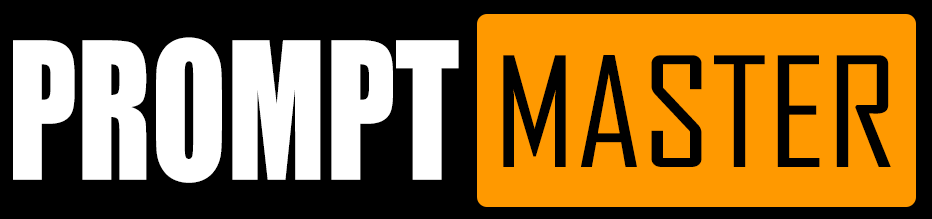
<style>
.page{position:relative;width:932px;height:219px;background:#000000}
.page>*{position:absolute;margin:0}
.t1{font:176px "Impact";color:#ffffff;scale:0.79 1}
.t2{font:145.6px "AgencyFB-Reg";color:#000000;scale:1.13 1}
</style>
<div class="page">
<p class="t1" style="left:13px;top:37px;width:446px;height:146px">PROMPT</p>
<p class="t2" style="left:503px;top:55px;width:388px;height:112px">MASTER</p>
</div>
